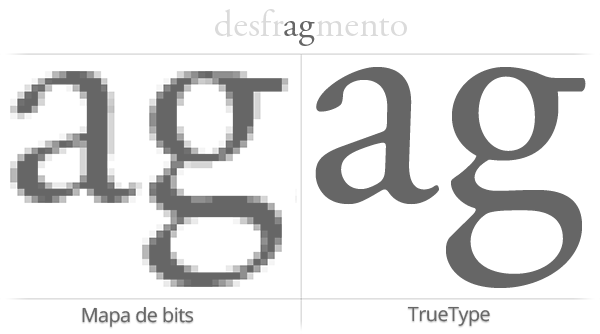
<style>
.page{position:relative;width:600px;height:334px;background:#ffffff}
.page>*{position:absolute;margin:0}
.t1{font:37.3px "AGaramondPro-Regular";color:#dbdbdb}
.t2{font:37.3px "AGaramondPro-Regular";color:#666666}
.t3{font:328.1px "AGaramondPro-Regular";color:#666666}
.t4{font:19.7px "OpenSans";letter-spacing:-0.025em;color:#666666}
</style>
<div class="page">
<p class="t1" style="left:215px;top:9px;width:192px;height:37px">desfr<span class="t2">ag</span>mento</p>
<p class="t3" style="left:315px;top:67px;width:271px;height:221px">ag</p>
<p class="t4" style="left:82px;top:306px;width:112px;height:21px">Mapa de bits</p>
<p class="t4" style="left:407px;top:306px;width:83px;height:20px">TrueType</p>
</div>
